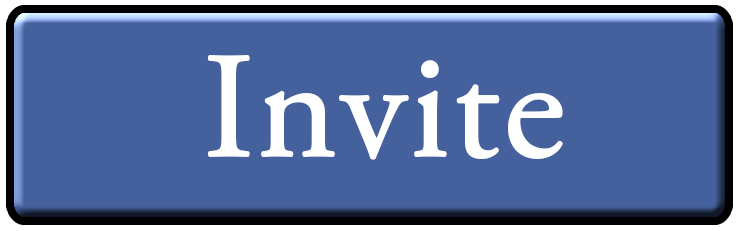
<style>
.page{position:relative;width:746px;height:231px;background:#45619d}
.page>*{position:absolute;margin:0}
.t1{font:151.7px "AGaramondPro-Regular";color:#ffffff;font-weight:bold}
</style>
<div class="page">
<p class="t1" style="left:207px;top:55px;width:356px;height:105px">Invite</p>
</div>
